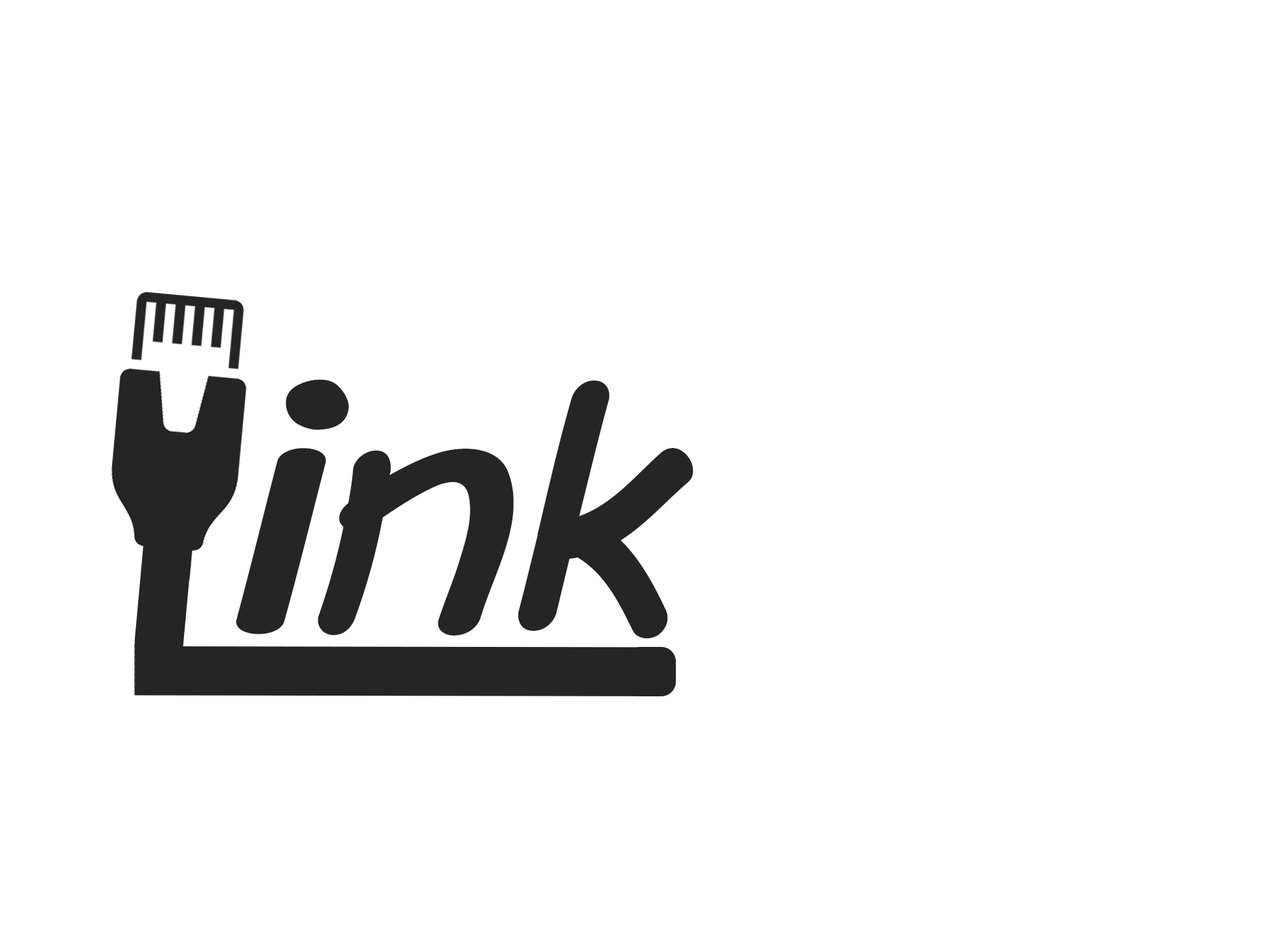
<style>
.page{position:relative;width:1261px;height:946px;background:#ffffff}
.page>*{position:absolute;margin:0}
.t1{font:353.1px "FlowExt-Bold";letter-spacing:-0.06em;color:#252525;scale:1.25 1}
</style>
<div class="page">
<p class="t1" style="left:236px;top:379px;width:457px;height:260px">ink</p>
</div>
